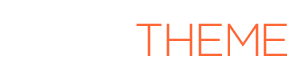
<style>
.page{position:relative;width:300px;height:80px;background:#ffffff}
.page>*{position:absolute;margin:0}
.t1{font:46px "Gotham-Light";color:#ff6633;text-transform:uppercase}
.t2{font:46px "Gotham-Ultra";letter-spacing:0.05em;color:#ffffff;text-transform:uppercase}
</style>
<div class="page">
<p class="t1" style="left:0px;top:23px;width:287px;height:34px"><span class="t2">Bold</span>theme</p>
</div>
